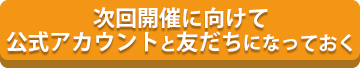
<style>
.page{position:relative;width:360px;height:68px;background:#f39515}
.page>*{position:absolute;margin:0}
.t1{font:22px/24px "KozGoPr6N-Bold";color:#ffffff}
.t2{font:17px/24px "KozGoPr6N-Bold";color:#ffffff}
.t3{font:19px/24px "KozGoPr6N-Bold";color:#ffffff}
</style>
<div class="page">
<p class="t1" style="left:6px;top:7px;width:347px;height:46px;text-align:center">次回開催に向けて<br>公式アカウント<span class="t2">と</span>友だち<span class="t3">になっておく</span></p>
</div>
